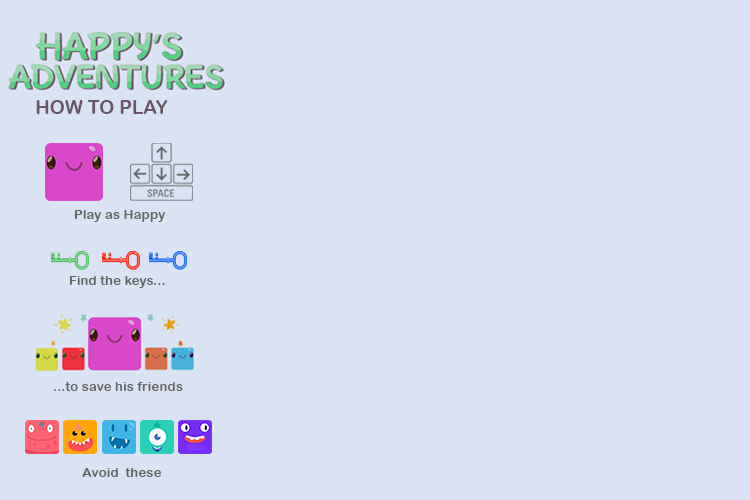
<style>
.page{position:relative;width:750px;height:500px;background:#dae3f3}
.page>*{position:absolute;margin:0}
.t1{font:19.1px "ArialRoundedMTBold";color:#685666}
.t2{font:13.4px "ArialRoundedMTBold";color:#656565}
</style>
<div class="page">
<p class="t1" style="left:36px;top:100px;width:132px;height:14px">HOW TO PLAY</p>
<p class="t2" style="left:74px;top:210px;width:91px;height:12px">Play as Happy</p>
<p class="t2" style="left:69px;top:276px;width:96px;height:12px">Find the keys...</p>
<p class="t2" style="left:54px;top:382px;width:129px;height:9px">...to save his friends</p>
<p class="t2" style="left:82px;top:468px;width:79px;height:9px">Avoid  these</p>
</div>
